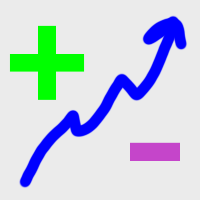
<style>
.page{position:relative;width:200px;height:200px;background:#ebebeb}
.page>*{position:absolute;margin:0}
.t1{font:150px "KohinoorBangla-Bold";color:#00ff00}
.t2{font:150px "KohinoorBangla-Bold";color:#c545ca}
</style>
<div class="page">
<p class="t1" style="left:9px;top:25px;width:76px;height:75px">+</p>
<p class="t2" style="left:130px;top:142px;width:50px;height:19px">-</p>
</div>
